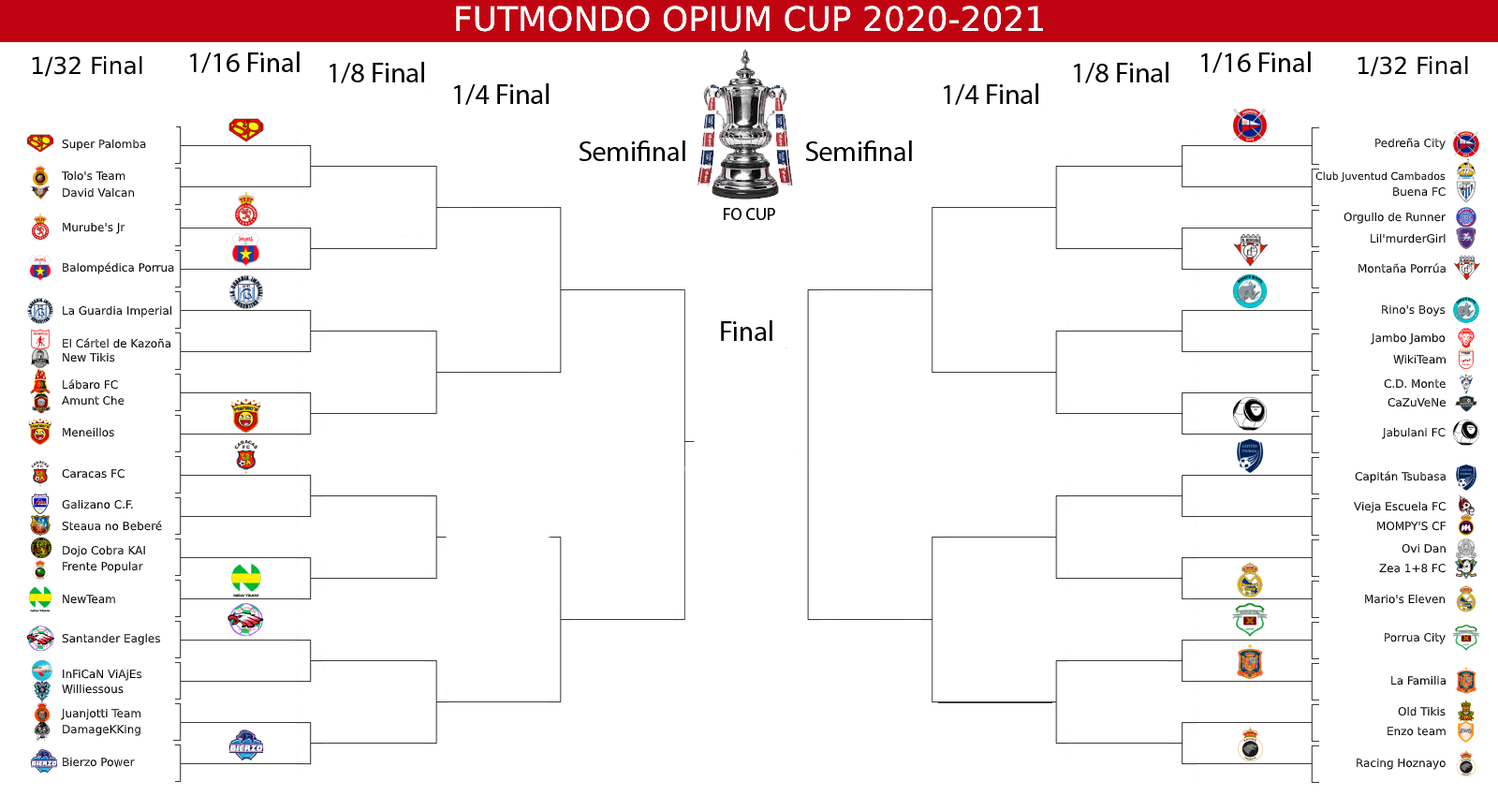
<style>
.page{position:relative;width:1498px;height:796px;background:#ffffff}
.page>*{position:absolute;margin:0}
.t1{font:33.7px "DejaVuSans";color:#ffffff}
.t2{font:23.4px "DejaVuSans";color:#000000}
.t3{font:11.2px "DejaVuSans";color:#000000}
.t4{font:10.3px "DejaVuSans";color:#000000}
</style>
<div class="page">
<p class="t1" style="left:456px;top:6px;width:587px;height:26px">FUTMONDO OPIUM CUP 2020-2021</p>
<p class="t2" style="left:32px;top:56px;width:110px;height:21px">1/32 Final</p>
<p class="t2" style="left:1358px;top:56px;width:110px;height:21px">1/32 Final</p>
<p class="t3" style="left:1376px;top:138px;width:70px;height:12px">Pedreña City</p>
<p class="t3" style="left:62px;top:139px;width:84px;height:12px">Super Palomba</p>
<p class="t3" style="left:61px;top:170px;width:64px;height:11px">Tolo's Team</p>
<p class="t4" style="left:1316px;top:171px;width:130px;height:12px">Club Juventud Cambados</p>
<p class="t3" style="left:63px;top:187px;width:71px;height:11px">David Valcan</p>
<p class="t3" style="left:1393px;top:187px;width:53px;height:10px">Buena FC</p>
<p class="t3" style="left:63px;top:222px;width:62px;height:12px">Murube's Jr</p>
<p class="t3" style="left:1344px;top:212px;width:102px;height:12px">Orgullo de Runner</p>
<p class="t3" style="left:1371px;top:233px;width:75px;height:10px">Lil'murderGirl</p>
<p class="t3" style="left:63px;top:262px;width:111px;height:12px">Balompédica Porrua</p>
<p class="t3" style="left:1359px;top:263px;width:87px;height:10px">Montaña Porrúa</p>
<p class="t3" style="left:63px;top:305px;width:108px;height:12px">La Guardia Imperial</p>
<p class="t3" style="left:1382px;top:304px;width:64px;height:12px">Rino's Boys</p>
<p class="t3" style="left:63px;top:338px;width:107px;height:10px">El Cártel de Kazoña</p>
<p class="t3" style="left:1371px;top:332px;width:75px;height:13px">Jambo Jambo</p>
<p class="t3" style="left:63px;top:352px;width:52px;height:10px">New Tikis</p>
<p class="t3" style="left:1393px;top:354px;width:53px;height:10px">WikiTeam</p>
<p class="t3" style="left:63px;top:379px;width:55px;height:11px">Lábaro FC</p>
<p class="t3" style="left:1384px;top:379px;width:62px;height:10px">C.D. Monte</p>
<p class="t3" style="left:62px;top:395px;width:63px;height:10px">Amunt Che</p>
<p class="t3" style="left:1388px;top:398px;width:58px;height:9px">CaZuVeNe</p>
<p class="t3" style="left:63px;top:427px;width:51px;height:10px">Meneillos</p>
<p class="t3" style="left:1382px;top:427px;width:64px;height:12px">Jabulani FC</p>
<p class="t3" style="left:62px;top:469px;width:63px;height:9px">Caracas FC</p>
<p class="t3" style="left:1355px;top:471px;width:91px;height:12px">Capitán Tsubasa</p>
<p class="t3" style="left:62px;top:499px;width:71px;height:10px">Galizano C.F.</p>
<p class="t3" style="left:1354px;top:501px;width:92px;height:12px">Vieja Escuela FC</p>
<p class="t3" style="left:62px;top:521px;width:100px;height:10px">Steaua no Beberé</p>
<p class="t3" style="left:1377px;top:522px;width:69px;height:9px">MOMPY'S CF</p>
<p class="t3" style="left:63px;top:545px;width:82px;height:12px">Dojo Cobra KAI</p>
<p class="t3" style="left:1402px;top:543px;width:44px;height:10px">Ovi Dan</p>
<p class="t3" style="left:63px;top:561px;width:80px;height:12px">Frente Popular</p>
<p class="t3" style="left:1379px;top:564px;width:67px;height:9px">Zea 1+8 FC</p>
<p class="t3" style="left:1365px;top:594px;width:81px;height:10px">Mario's Eleven</p>
<p class="t3" style="left:63px;top:595px;width:52px;height:9px">NewTeam</p>
<p class="t3" style="left:62px;top:633px;width:98px;height:12px">Santander Eagles</p>
<p class="t3" style="left:1385px;top:632px;width:61px;height:12px">Porrua City</p>
<p class="t3" style="left:63px;top:669px;width:79px;height:12px">InFiCaN ViAjEs</p>
<p class="t3" style="left:1391px;top:675px;width:55px;height:10px">La Familia</p>
<p class="t3" style="left:62px;top:684px;width:62px;height:10px">Williessous</p>
<p class="t3" style="left:61px;top:708px;width:80px;height:12px">Juanjotti Team</p>
<p class="t3" style="left:1398px;top:706px;width:48px;height:10px">Old Tikis</p>
<p class="t3" style="left:63px;top:724px;width:77px;height:12px">DamageKKing</p>
<p class="t3" style="left:1388px;top:727px;width:58px;height:9px">Enzo team</p>
<p class="t3" style="left:63px;top:757px;width:72px;height:10px">Bierzo Power</p>
<p class="t3" style="left:1357px;top:758px;width:89px;height:12px">Racing Hoznayo</p>
</div>
